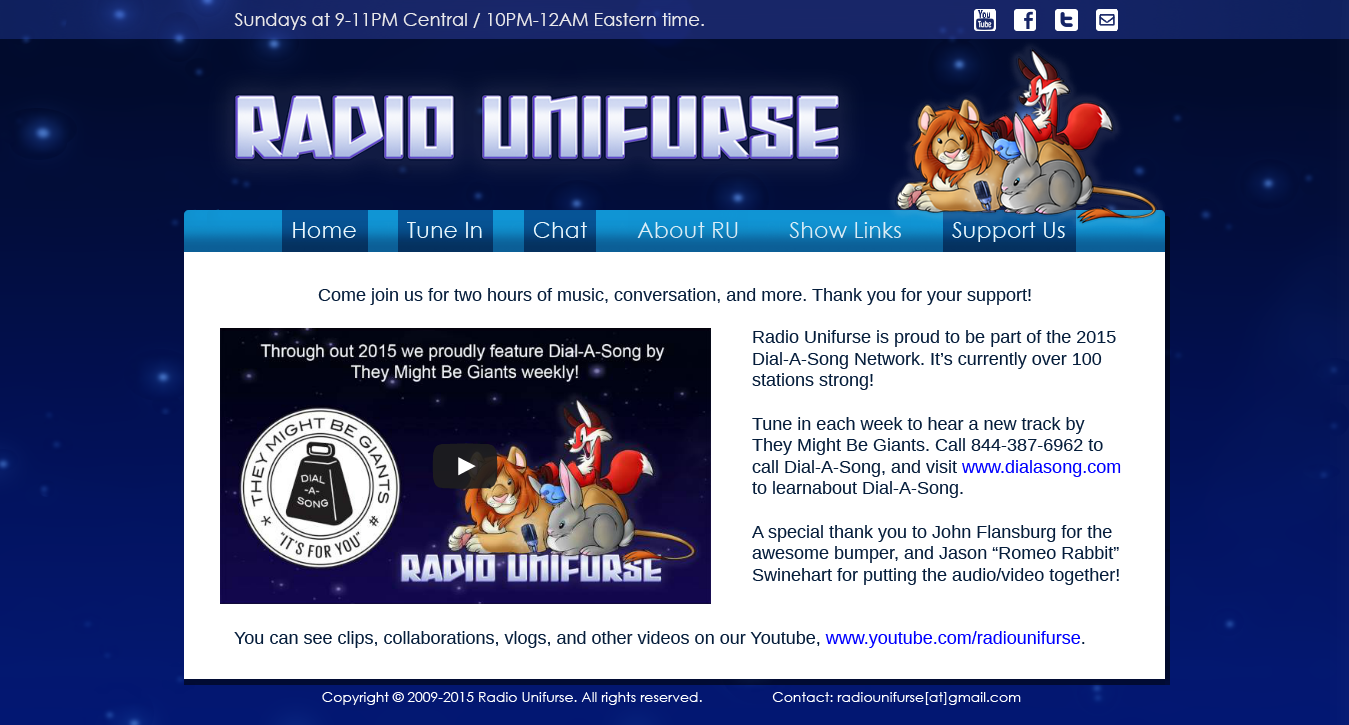
<style>
.page{position:relative;width:1349px;height:725px;background:#ffffff}
.page>*{position:absolute;margin:0}
.t1{font:18px "CenturyGothic";color:#ffffff}
.t2{font:18px "Arimo";color:#051d3b}
.t3{font:18px "Arimo";color:#0000ff}
</style>
<div class="page">
<p class="t1" style="left:234px;top:13px;width:470px;height:17px;opacity:0.85">Sundays at 9-11PM Central / 10PM-12AM Eastern time.</p>
<p class="t2" style="left:318px;top:288px;width:713px;height:17px">Come join us for two hours of music, conversation, and more. Thank you for your support!</p>
<p class="t2" style="left:752px;top:330px;width:369px;height:255px">Radio Unifurse is proud to be part of the 2015 <br>Dial-A-Song Network. It’s currently over 100 <br>stations strong!<br><br>Tune in each week to hear a new track by <br>They Might Be Giants. Call 844-387-6962 to <br>call Dial-A-Song, and visit <span class="t3">www.dialasong.com</span> <br>to learnabout Dial-A-Song.<br><br>A special thank you to John Flansburg for the<br>awesome bumper, and Jason “Romeo Rabbit”<br>Swinehart for putting the audio/video together!</p>
<p class="t2" style="left:234px;top:631px;width:851px;height:17px">You can see clips, collaborations, vlogs, and other videos on our Youtube, <span class="t3">www.youtube.com/radiounifurse</span>.</p>
</div>
